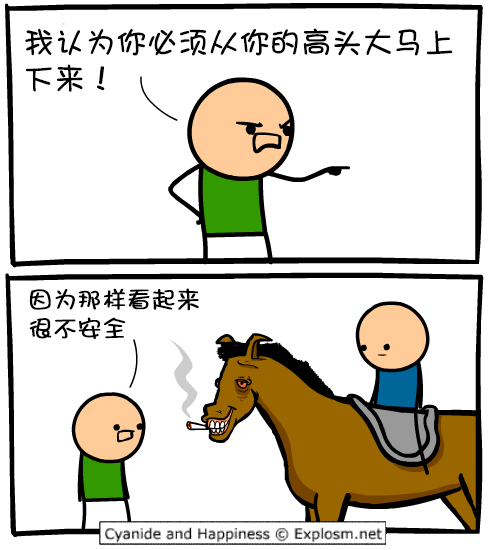
<style>
.page{position:relative;width:490px;height:550px;background:#ffffff}
.page>*{position:absolute;margin:0}
.t1{font:30px "DFShaoNvW5";color:#000000;font-weight:bold}
.t2{font:24px "DFShaoNvW5";color:#000000;font-weight:bold}
</style>
<div class="page">
<p class="t1" style="left:25px;top:28px;width:428px;height:64px">我认为你必须从你的高头大马上<br>下来！</p>
<p class="t2" style="left:29px;top:288px;width:170px;height:51px">因为那样看起来<br>很不安全</p>
</div>
